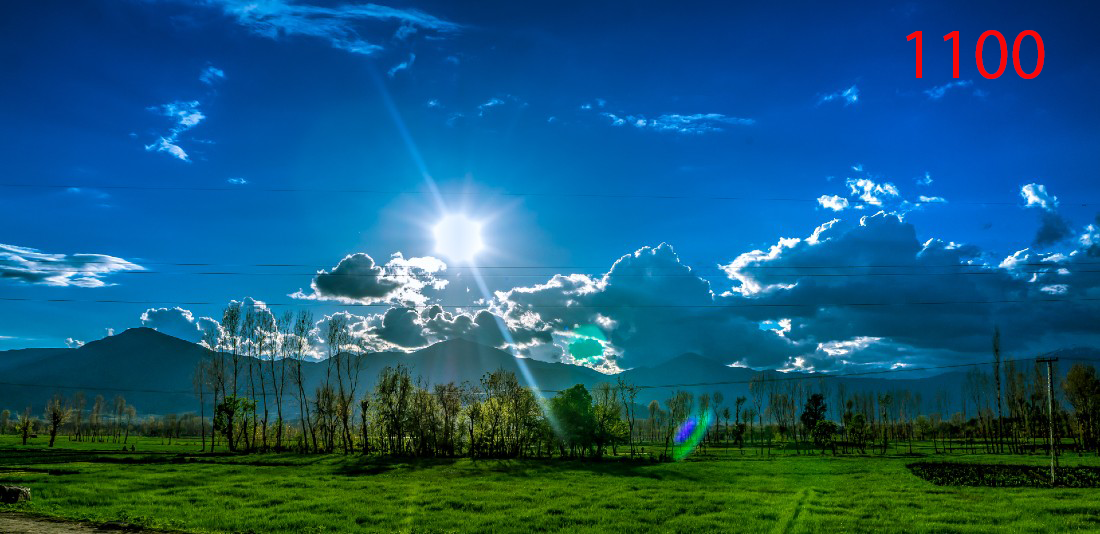
<style>
.page{position:relative;width:1100px;height:534px}
.page>*{position:absolute;margin:0}
.t1{font:72px "MyriadPro-Regular";color:#f80707}
</style>
<div class="page">
<p class="t1" style="left:906px;top:30px;width:139px;height:49px">1100</p>
</div>
